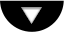
<style>
.page{position:relative;width:64px;height:32px;background:#000000}
.page>*{position:absolute;margin:0}
.t1{font:26px "MalgunGothic"}
</style>
<div class="page">
<p class="t1" style="left:21px;top:7px;width:21px;height:17px">▼</p>
</div>
